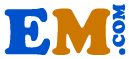
<style>
.page{position:relative;width:129px;height:59px;background:#ffffff}
.page>*{position:absolute;margin:0}
.t1{font:25px "CooperBlack";color:#0055cc;font-variant:small-caps;font-weight:bold}
.t2{font:66.7px "CooperBlack";color:#0052cc;font-weight:bold}
.t3{font:66.7px "CooperBlack";color:#cc7700;font-weight:bold}
</style>
<div class="page">
<p class="t1" style="left:112px;top:4px;width:14px;height:51px;rotate:-90deg">.com</p>
<p class="t2" style="left:4px;top:8px;width:107px;height:47px">E<span class="t3">M</span></p>
</div>
